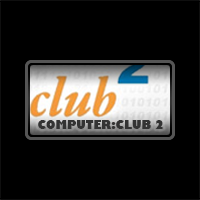
<style>
.page{position:relative;width:200px;height:200px;background:#000000}
.page>*{position:absolute;margin:0}
.t1{font:11px "GillSans-UltraBold";color:#333333}
</style>
<div class="page">
<p class="t1" style="left:38px;top:120px;width:125px;height:9px">COMPUTER:CLUB 2</p>
</div>
